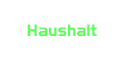
<style>
.page{position:relative;width:123px;height:60px;background:#ffffff}
.page>*{position:absolute;margin:0}
.t1{font:16px "AeroRegularSWFTE";color:#5cff58}
</style>
<div class="page">
<p class="t1" style="left:27px;top:24px;width:70px;height:12px">Haushalt</p>
</div>
